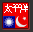
<style>
.page{position:relative;width:33px;height:32px;background:#333333}
.page>*{position:absolute;margin:0}
.t1{font:10.4px "SimSun";letter-spacing:-0.25em;color:#ffffff}
</style>
<div class="page">
<p class="t1" style="left:4px;top:4px;width:24px;height:9px">太平洋</p>
</div>
